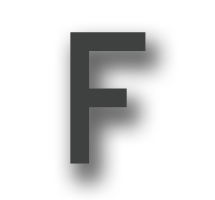
<style>
.page{position:relative;width:215px;height:200px;background:#ffffff}
.page>*{position:absolute;margin:0}
.t1{font:150px "Manteka";color:#3f4040}
</style>
<div class="page">
<p class="t1" style="left:70px;top:32px;width:76px;height:132px">F</p>
</div>
